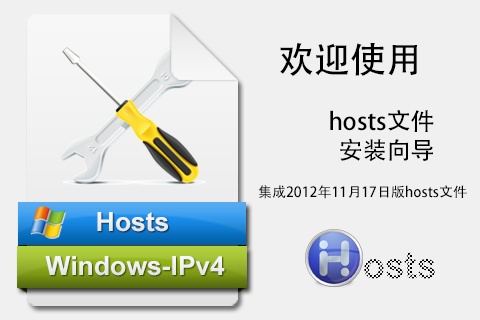
<style>
.page{position:relative;width:480px;height:320px;background:#f0f0f0}
.page>*{position:absolute;margin:0}
.t1{font:24px "AdobeHeitiStd-Regular";color:#000000}
.t2{font:36px "AdobeHeitiStd-Regular";color:#000000}
.t3{font:14px "AdobeHeitiStd-Regular";color:#000000}
.t4{font:26.5px "Arial-BoldMT";color:#ffffff}
.t5{font:36px "ArialRoundedMTBold"}
</style>
<div class="page">
<p class="t1" style="left:280px;top:42px;width:154px;height:120px"><span class="t2">欢迎使用<br></span><br>hosts文件<br>安装向导</p>
<p class="t3" style="left:258px;top:185px;width:209px;height:14px">集成2012年11月17日版hosts文件</p>
<p class="t4" style="left:97px;top:212px;width:71px;height:20px">Hosts</p>
<p class="t4" style="left:45px;top:256px;width:180px;height:20px">Windows-IPv4</p>
<p class="t5" style="left:364px;top:252px;width:71px;height:27px">osts</p>
</div>
